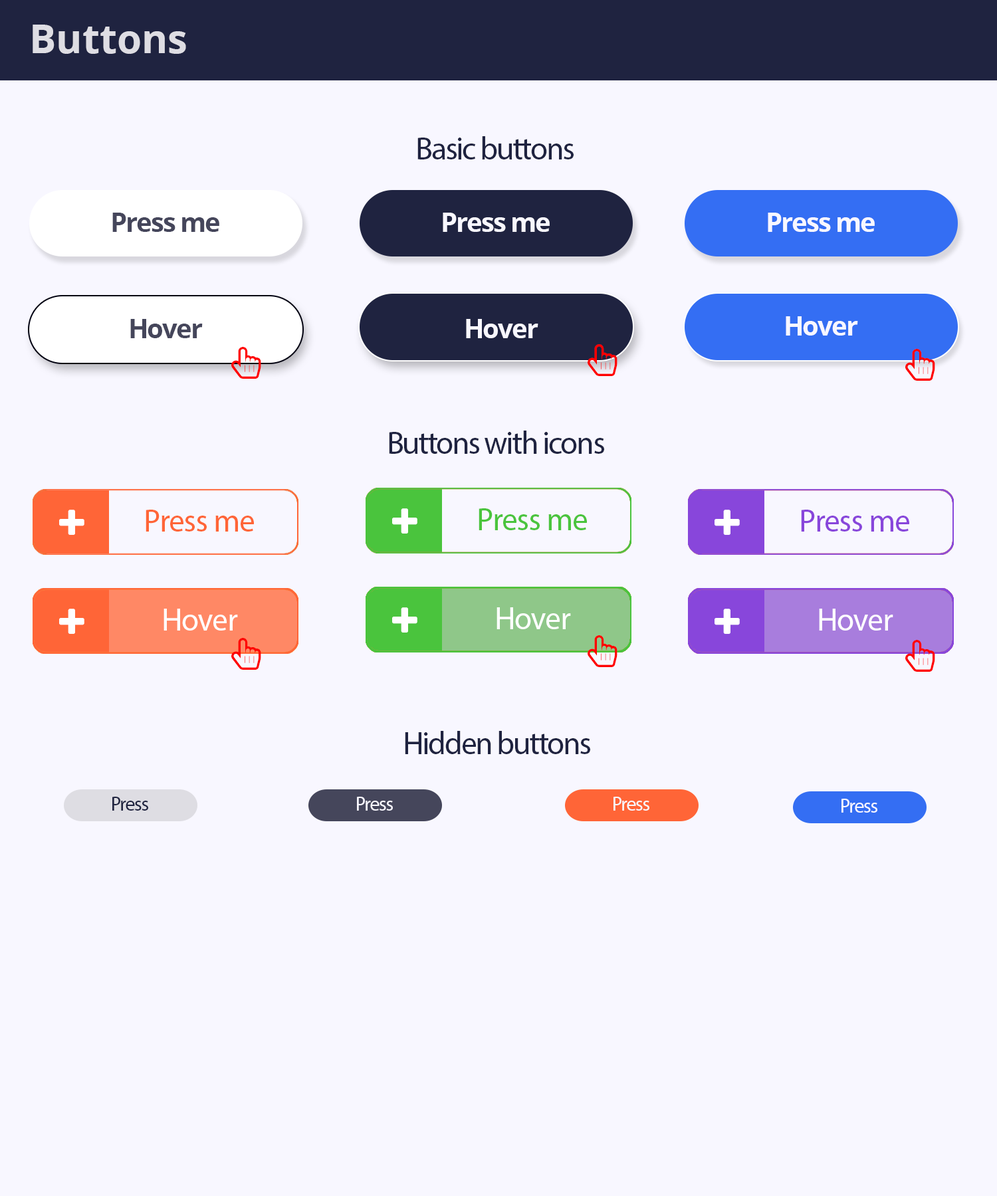
<style>
.page{position:relative;width:997px;height:1196px;background:#f8f7ff}
.page>*{position:absolute;margin:0}
.t1{font:39.9px "OpenSans-Bold";color:#dedde3}
.t2{font:31.9px "MyriadPro-Regular";letter-spacing:-0.05em;color:#1f2340}
.t3{font:26.6px "OpenSans-Bold";letter-spacing:-0.05em;color:#45465b}
.t4{font:26.6px "OpenSans-Bold";letter-spacing:-0.05em;color:#f8f7ff}
.t5{font:31.9px "MyriadPro-Regular";letter-spacing:-0.025em;color:#ff6537}
.t6{font:31.9px "MyriadPro-Regular";letter-spacing:-0.025em;color:#4ac43d}
.t7{font:31.9px "MyriadPro-Regular";letter-spacing:-0.025em;color:#8846db}
.t8{font:31.9px "MyriadPro-Regular";letter-spacing:-0.025em;color:#ffffff}
.t9{font:19.9px "MyriadPro-Regular";letter-spacing:-0.05em;color:#1f2340}
.t10{font:19.9px "MyriadPro-Regular";letter-spacing:-0.05em;color:#f8f7ff}
</style>
<div class="page">
<p class="t1" style="left:33px;top:25px;width:153px;height:29px">Buttons</p>
<p class="t2" style="left:417px;top:136px;width:157px;height:23px">Basic buttons</p>
<p class="t3" style="left:112px;top:213px;width:107px;height:19px">Press me</p>
<p class="t4" style="left:443px;top:213px;width:107px;height:19px">Press me</p>
<p class="t4" style="left:768px;top:213px;width:107px;height:19px">Press me</p>
<p class="t4" style="left:786px;top:316px;width:72px;height:20px">Hover</p>
<p class="t3" style="left:130px;top:319px;width:73px;height:19px">Hover</p>
<p class="t4" style="left:466px;top:319px;width:72px;height:19px">Hover</p>
<p class="t2" style="left:389px;top:431px;width:215px;height:23px">Buttons with icons</p>
<p class="t5" style="left:146px;top:510px;width:108px;height:22px">Press me</p>
<p class="t6" style="left:478px;top:508px;width:109px;height:22px">Press me</p>
<p class="t7" style="left:801px;top:510px;width:108px;height:22px">Press me</p>
<p class="t8" style="left:163px;top:609px;width:75px;height:22px">Hover</p>
<p class="t8" style="left:496px;top:607px;width:75px;height:22px">Hover</p>
<p class="t8" style="left:819px;top:609px;width:74px;height:22px">Hover</p>
<p class="t2" style="left:405px;top:731px;width:185px;height:23px">Hidden buttons</p>
<p class="t9" style="left:112px;top:797px;width:36px;height:14px">Press</p>
<p class="t10" style="left:357px;top:797px;width:36px;height:14px">Press</p>
<p class="t10" style="left:613px;top:797px;width:36px;height:14px">Press</p>
<p class="t10" style="left:841px;top:799px;width:36px;height:14px">Press</p>
</div>
